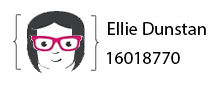
<style>
.page{position:relative;width:220px;height:90px;background:#ffffff}
.page>*{position:absolute;margin:0}
.t1{font:18px "MyriadPro-Regular";letter-spacing:0.01em;color:#000001}
.t2{font:18px "MyriadPro-Regular";letter-spacing:0.01em;color:#000000}
</style>
<div class="page">
<p class="t1" style="left:108px;top:22px;width:98px;height:13px">Ellie Dunstan</p>
<p class="t2" style="left:107px;top:52px;width:73px;height:12px">16018770</p>
</div>
